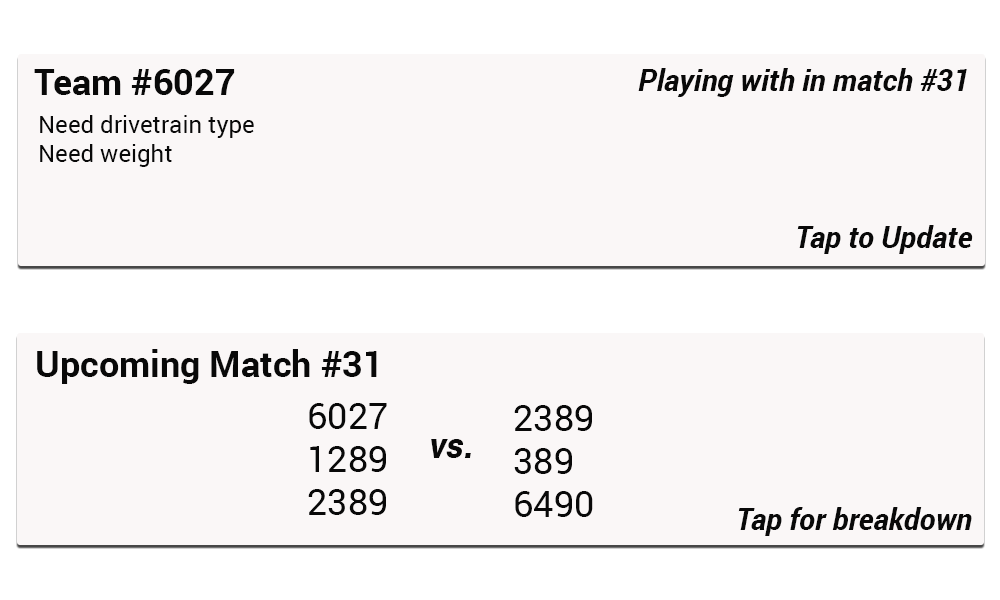
<style>
.page{position:relative;width:1000px;height:600px;background:#faf7f7}
.page>*{position:absolute;margin:0}
.t1{font:36px "Roboto-Bold";color:#090909}
.t2{font:30px "Roboto-BoldItalic";color:#090909}
.t3{font:24px "Roboto-Regular";color:#090909}
.t4{font:36px "Roboto-Regular";color:#090909}
.t5{font:36px "Roboto-BoldItalic";color:#090909}
</style>
<div class="page">
<p class="t1" style="left:34px;top:69px;width:201px;height:26px">Team #6027</p>
<p class="t2" style="left:638px;top:68px;width:329px;height:29px">Playing with in match #31</p>
<p class="t3" style="left:40px;top:115px;width:214px;height:52px">Need drivetrain type<br>Need weight</p>
<p class="t2" style="left:797px;top:225px;width:176px;height:29px">Tap to Update</p>
<p class="t1" style="left:37px;top:349px;width:340px;height:35px">Upcoming Match #31</p>
<p class="t4" style="left:308px;top:403px;width:79px;height:112px">6027<br>1289<br>2389</p>
<p class="t4" style="left:514px;top:405px;width:79px;height:112px">2389<br>389<br>6490</p>
<p class="t5" style="left:431px;top:439px;width:40px;height:19px">vs.</p>
<p class="t2" style="left:738px;top:507px;width:234px;height:29px">Tap for breakdown</p>
</div>
